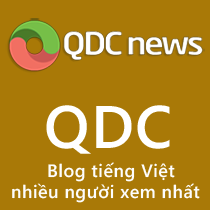
<style>
.page{position:relative;width:210px;height:210px;background:#a97907}
.page>*{position:absolute;margin:0}
.t1{font:60px "SegoeWP-Semibold";letter-spacing:0.025em;color:#ffffff}
.t2{font:18px "SegoeWP-Semibold";letter-spacing:0.025em;color:#fefefe}
</style>
<div class="page">
<p class="t1" style="left:46px;top:105px;width:124px;height:49px">QDC</p>
<p class="t2" style="left:48px;top:162px;width:127px;height:20px">Blog tiếng Việt</p>
<p class="t2" style="left:12px;top:183px;width:188px;height:20px">nhiều người xem nhất</p>
</div>
